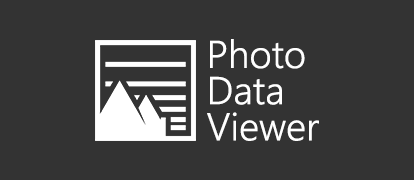
<style>
.page{position:relative;width:414px;height:180px;background:#333333}
.page>*{position:absolute;margin:0}
.t1{font:38.9px/36.2px "SegoeUI-Semilight";color:#ffffff}
</style>
<div class="page">
<p class="t1" style="left:207px;top:39px;width:112px;height:102px">Photo<br>Data<br>Viewer</p>
</div>
